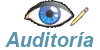
<style>
.page{position:relative;width:100px;height:50px;background:#ffffff}
.page>*{position:absolute;margin:0}
.t1{font:20px "Arial-BoldItalicMT";color:#5894ae}
</style>
<div class="page">
<p class="t1" style="left:5px;top:32px;width:89px;height:15px">Auditoría</p>
</div>
